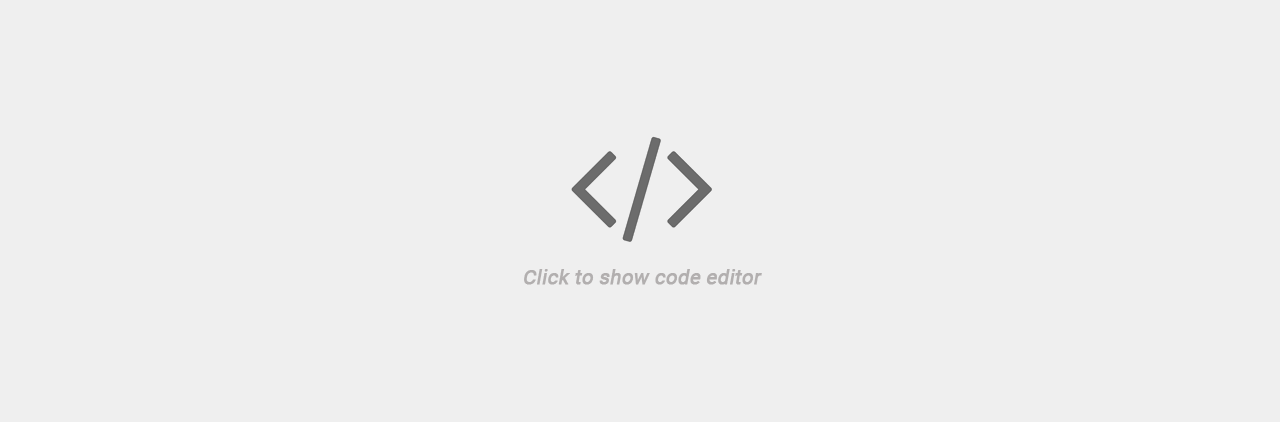
<style>
.page{position:relative;width:1280px;height:422px;background:#efefef}
.page>*{position:absolute;margin:0}
.t1{font:20px "Roboto-Regular";color:#b2afaf;font-weight:bold;font-style:italic}
</style>
<div class="page">
<p class="t1" style="left:524px;top:269px;width:238px;height:16px">Click to show code editor</p>
</div>
